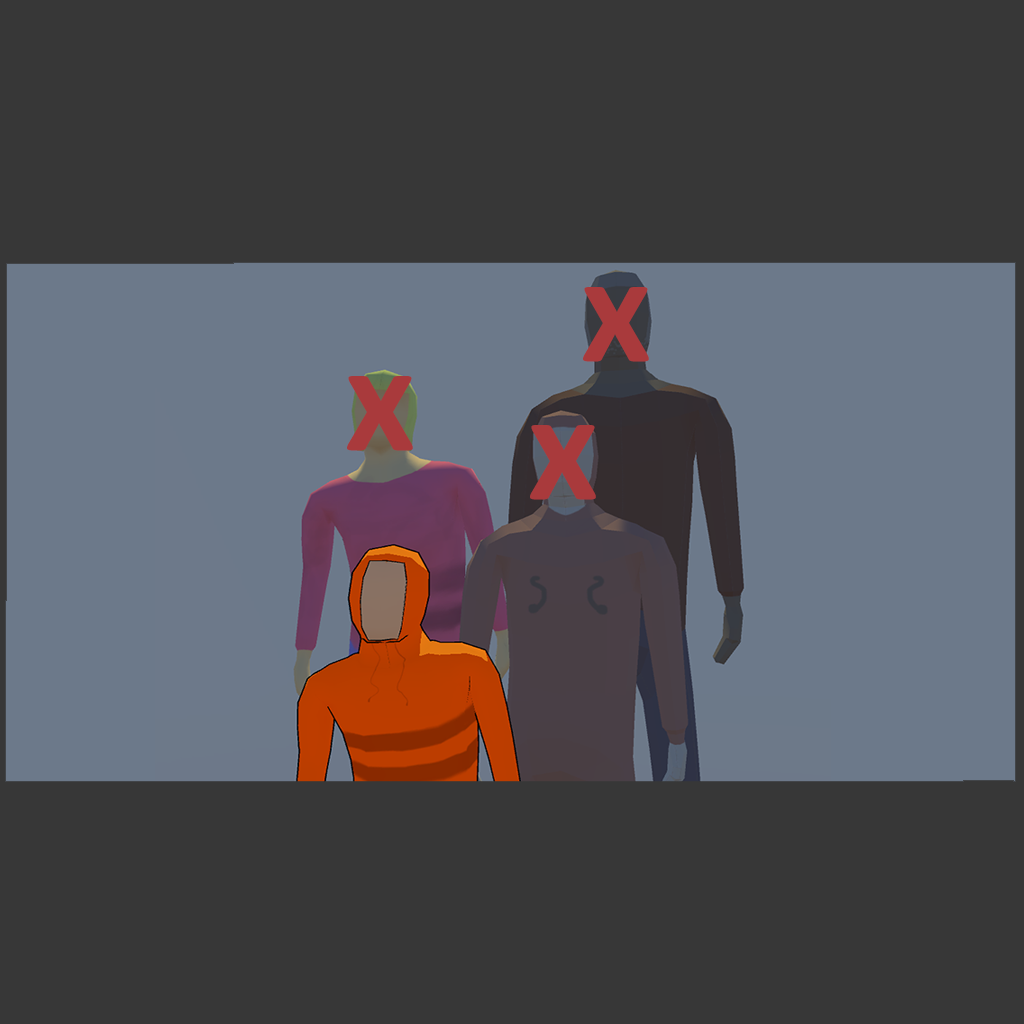
<style>
.page{position:relative;width:1024px;height:1024px;background:#373737}
.page>*{position:absolute;margin:0}
.t1{font:142px "Calibri-Bold";color:#a93a3c;font-variant:small-caps}
</style>
<div class="page">
<p class="t1" style="left:583px;top:287px;width:66px;height:75px">x</p>
<p class="t1" style="left:347px;top:376px;width:66px;height:75px">x</p>
<p class="t1" style="left:530px;top:425px;width:66px;height:75px">x</p>
</div>
